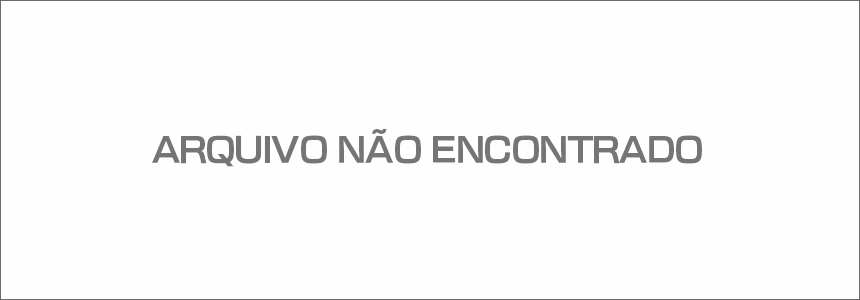
<style>
.page{position:relative;width:860px;height:300px;background:#fffeff}
.page>*{position:absolute;margin:0}
.t1{font:33.3px "NewRodinPro-B";letter-spacing:-0.035em;color:#767576}
</style>
<div class="page">
<p class="t1" style="left:152px;top:128px;width:550px;height:39px">ARQUIVO NÃO ENCONTRADO</p>
</div>
